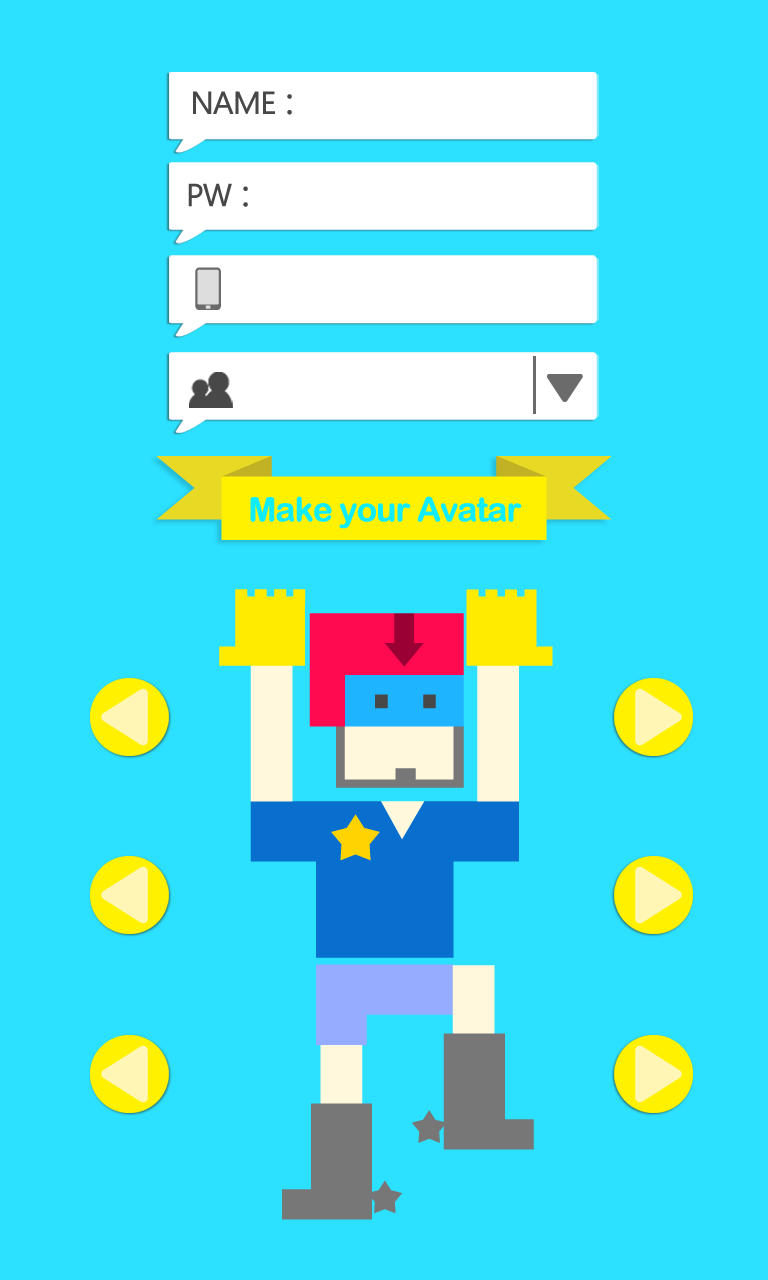
<style>
.page{position:relative;width:768px;height:1280px;background:#2ce0ff}
.page>*{position:absolute;margin:0}
.t1{font:30.8px "MalgunGothicRegular";letter-spacing:-0.05em;color:#484848;font-weight:bold}
.t2{font:36.6px "MalgunGothicRegular";letter-spacing:-0.05em;color:#484848;font-weight:bold}
.t3{font:33.3px "ArialRoundedMTBold";letter-spacing:-0.05em;color:#10ecfa;font-weight:bold}
</style>
<div class="page">
<p class="t1" style="left:193px;top:91px;width:99px;height:24px">NAME <span class="t2">:</span></p>
<p class="t1" style="left:188px;top:183px;width:60px;height:24px">PW <span class="t2">:</span></p>
<p class="t3" style="left:250px;top:496px;width:272px;height:33px">Make your Avatar</p>
</div>
